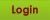
<style>
.page{position:relative;width:50px;height:20px}
.page>*{position:absolute;margin:0}
.t1{font:11.3px "CenturyGothic-Bold";color:#840909;scale:0.93 1}
</style>
<div class="page">
<p class="t1" style="left:12px;top:5px;width:26px;height:11px">Login</p>
</div>
